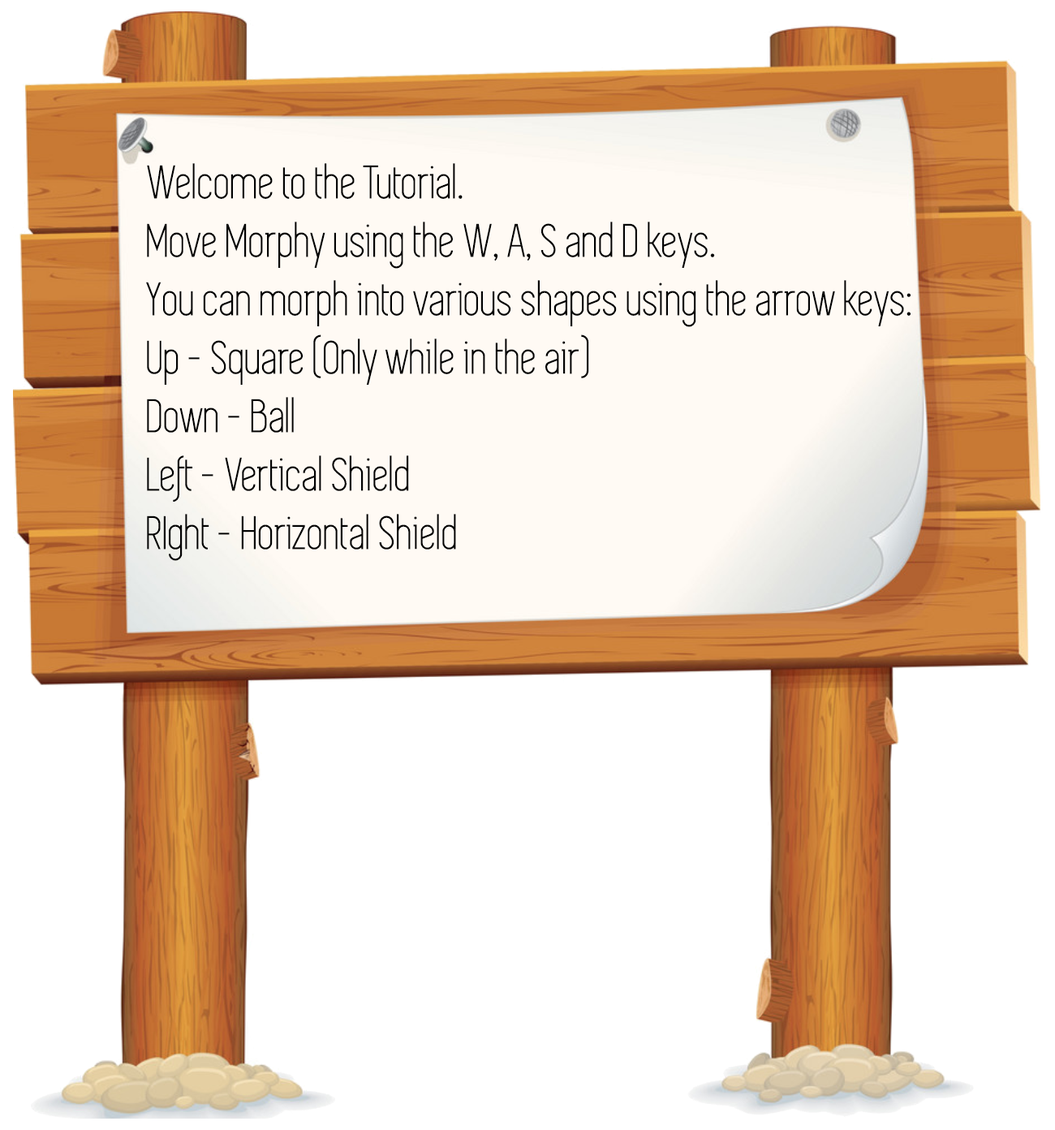
<style>
.page{position:relative;width:1055px;height:1130px;background:#ffffff}
.page>*{position:absolute;margin:0}
.t1{font:48.7px "Simplifica";color:#000000}
</style>
<div class="page">
<p class="t1" style="left:146px;top:163px;width:766px;height:398px">Welcome to the Tutorial.<br>Move Morphy using the W, A, S and D keys.<br>You can morph into various shapes using the arrow keys:<br>Up - Square (Only while in the air)<br>Down - Ball<br>Left - Vertical Shield<br>RIght - Horizontal Shield</p>
</div>
